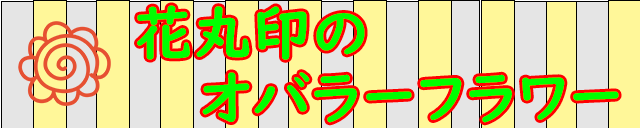
<style>
.page{position:relative;width:640px;height:128px;background:#fff799}
.page>*{position:absolute;margin:0}
.t1{font:59.6px "UDDigiKyokashoNK-B";color:#00ff00}
</style>
<div class="page">
<p class="t1" style="left:137px;top:5px;width:228px;height:55px">花丸印の</p>
<p class="t1" style="left:202px;top:72px;width:417px;height:51px">オバラーフラワー</p>
</div>
